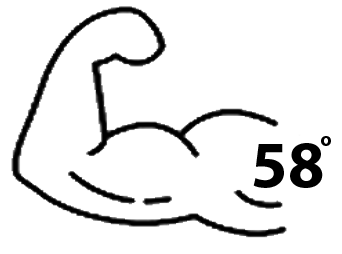
<style>
.page{position:relative;width:342px;height:254px;background:#ffffff}
.page>*{position:absolute;margin:0}
.t1{font:20px "MyriadPro-Bold";color:#000000}
.t2{font:66px "MyriadPro-Bold";color:#000000}
</style>
<div class="page">
<p class="t1" style="left:321px;top:136px;width:10px;height:10px">o</p>
<p class="t2" style="left:253px;top:143px;width:70px;height:45px">58</p>
</div>
